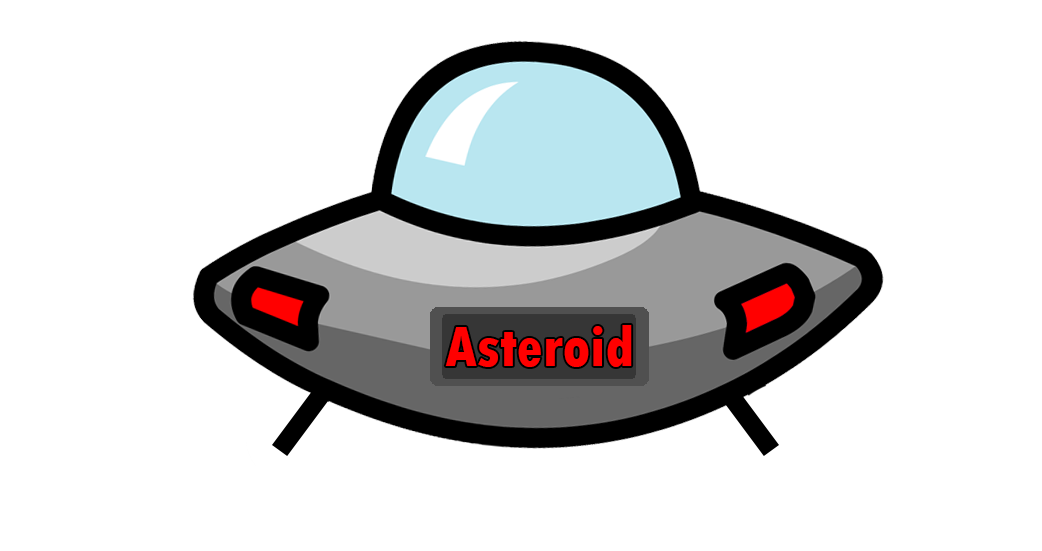
<style>
.page{position:relative;width:1042px;height:551px;background:#ffffff}
.page>*{position:absolute;margin:0}
.t1{font:60px "TwCenMT-CondensedExtraBold";color:#ff0000}
</style>
<div class="page">
<p class="t1" style="left:445px;top:325px;width:187px;height:42px">Asteroid</p>
</div>
